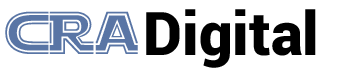
<style>
.page{position:relative;width:354px;height:70px;background:#ffffff}
.page>*{position:absolute;margin:0}
.t1{font:60px "StarJediOutline";color:#5975a5}
.t2{font:60px "Roboto-Black";color:#000000}
</style>
<div class="page">
<p class="t1" style="left:5px;top:11px;width:133px;height:43px">CRA</p>
<p class="t2" style="left:146px;top:9px;width:170px;height:59px">Digital</p>
</div>
